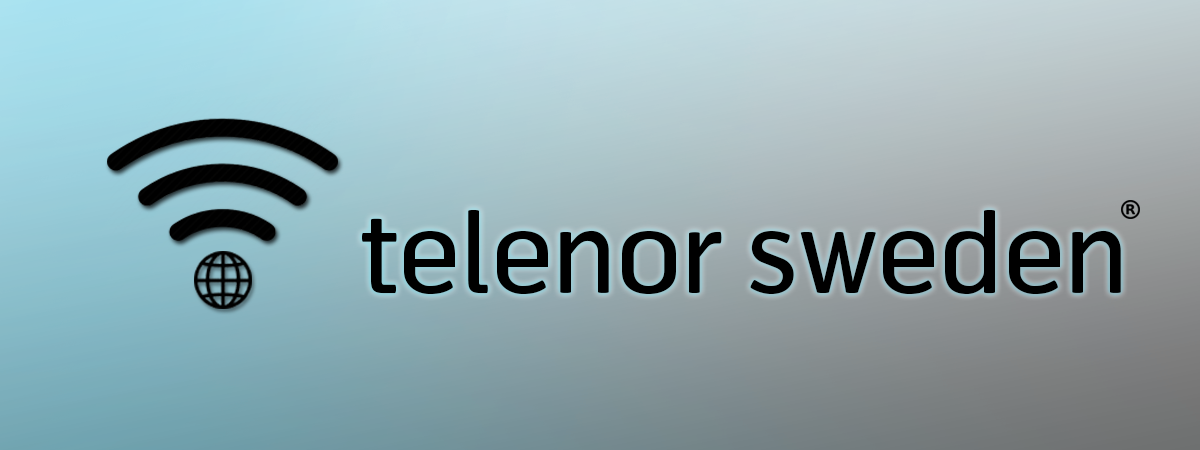
<style>
.page{position:relative;width:1200px;height:450px}
.page>*{position:absolute;margin:0}
.t1{font:112.2px "Telenor-Regular";color:#000000}
</style>
<div class="page">
<p class="t1" style="left:362px;top:210px;width:759px;height:84px">telenor sweden</p>
</div>
